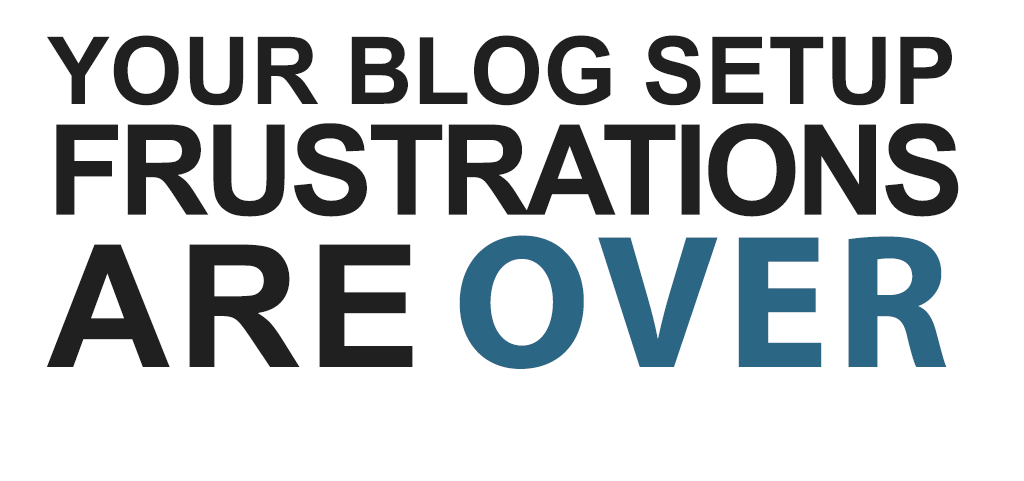
<style>
.page{position:relative;width:1024px;height:481px;background:#ffffff}
.page>*{position:absolute;margin:0}
.t1{font:94.1px/107.1px "Arial-BoldMT";color:#202020}
.t2{font:125.5px/110.5px "Arial-BoldMT";letter-spacing:-0.04em;color:#202020}
.t3{font:170.8px/152.4px "Arial-BoldMT";letter-spacing:0.04em;color:#202020}
.t4{font:191.7px/152.4px "MyriadPro-Bold";letter-spacing:0.04em;color:#2b6684}
</style>
<div class="page">
<p class="t1" style="left:47px;top:35px;width:912px;height:334px">YOUR BLOG SETUP <span class="t2">FRUSTRATIONS </span><span class="t3">ARE </span><span class="t4">OVER</span></p>
</div>
